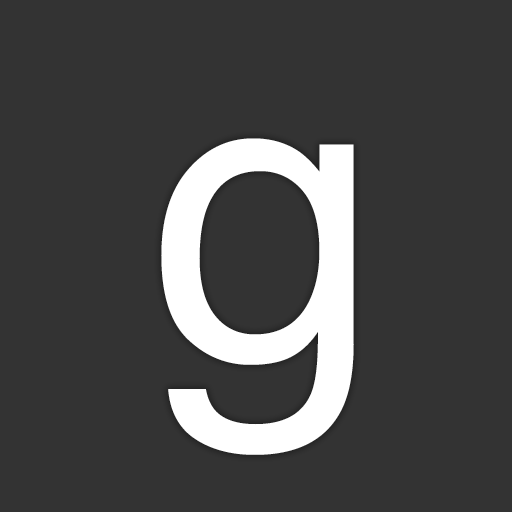
<style>
.page{position:relative;width:512px;height:512px;background:#333333}
.page>*{position:absolute;margin:0}
.t1{font:420px "Helvetica";color:#ffffff}
</style>
<div class="page">
<p class="t1" style="left:161px;top:138px;width:193px;height:317px">g</p>
</div>
